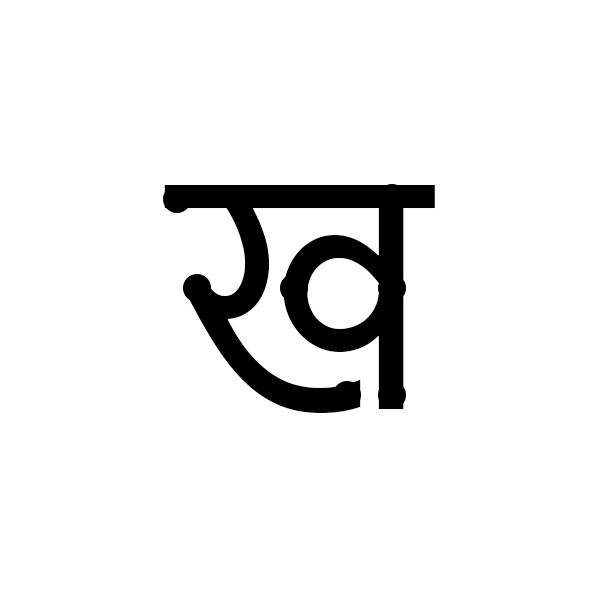
<style>
.page{position:relative;width:600px;height:600px;background:#ffffff}
.page>*{position:absolute;margin:0}
.t1{font:307px "NirmalaUI";color:#000000}
</style>
<div class="page">
<p class="t1" style="left:164px;top:185px;width:271px;height:228px">ख</p>
</div>
